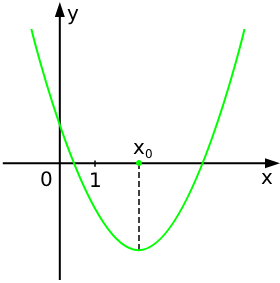
<style>
.page{position:relative;width:280px;height:283px;background:#ffffff}
.page>*{position:absolute;margin:0}
.t1{font:20px "DejaVuSans";color:#000000}
.t2{font:12px "DejaVuSans";color:#000000}
</style>
<div class="page">
<p class="t1" style="left:67px;top:9px;width:12px;height:16px">y</p>
<p class="t1" style="left:133px;top:143px;width:12px;height:11px">x</p>
<p class="t2" style="left:145px;top:149px;width:7px;height:10px">0</p>
<p class="t1" style="left:41px;top:171px;width:11px;height:16px">0</p>
<p class="t1" style="left:91px;top:172px;width:9px;height:15px">1</p>
<p class="t1" style="left:261px;top:173px;width:12px;height:11px">x</p>
</div>
